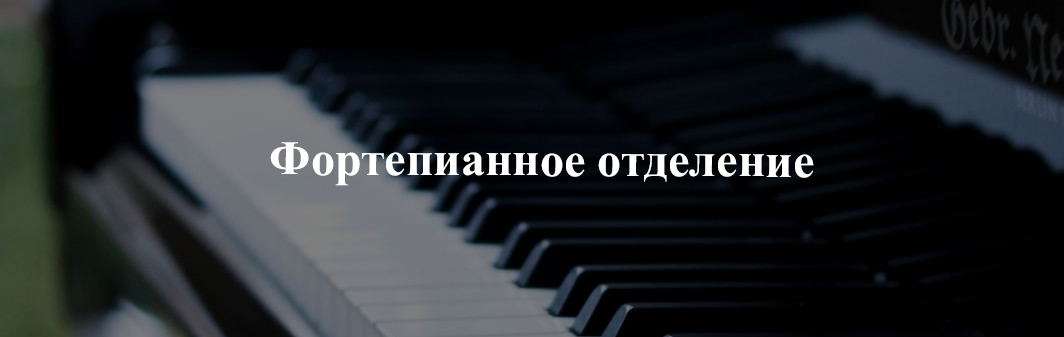
<style>
.page{position:relative;width:1064px;height:337px}
.page>*{position:absolute;margin:0}
.t1{font:48px "TimesNewRomanPS-BoldMT";color:#ffffff}
</style>
<div class="page">
<p class="t1" style="left:270px;top:142px;width:544px;height:44px">Фортепианное отделение</p>
</div>
